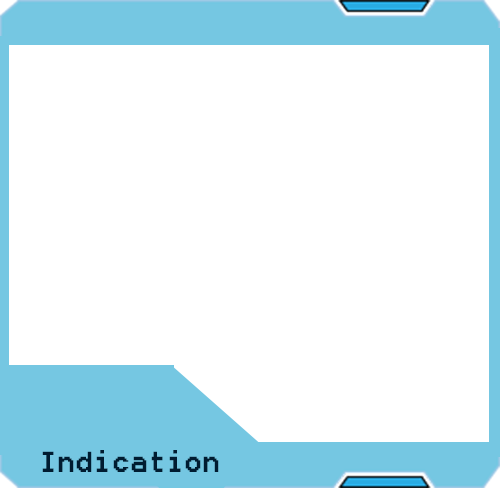
<style>
.page{position:relative;width:500px;height:488px;background:#ffffff}
.page>*{position:absolute;margin:0}
.t1{font:36px "8514oem";color:#001c31;scale:1.07 1}
</style>
<div class="page">
<p class="t1" style="left:42px;top:450px;width:177px;height:22px">Indication</p>
</div>
